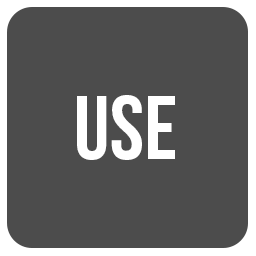
<style>
.page{position:relative;width:256px;height:256px;background:#4c4c4c}
.page>*{position:absolute;margin:0}
.t1{font:90px "BebasNeueBold";color:#ffffff}
</style>
<div class="page">
<p class="t1" style="left:77px;top:95px;width:98px;height:65px">use</p>
</div>
